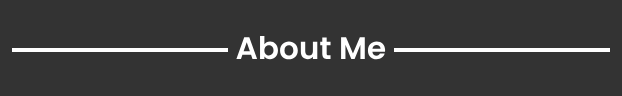
<style>
.page{position:relative;width:622px;height:96px;background:#333333}
.page>*{position:absolute;margin:0}
.t1{font:31.1px "Poppins-SemiBold";color:#ffffff}
</style>
<div class="page">
<p class="t1" style="left:236px;top:35px;width:150px;height:25px">About Me</p>
</div>
